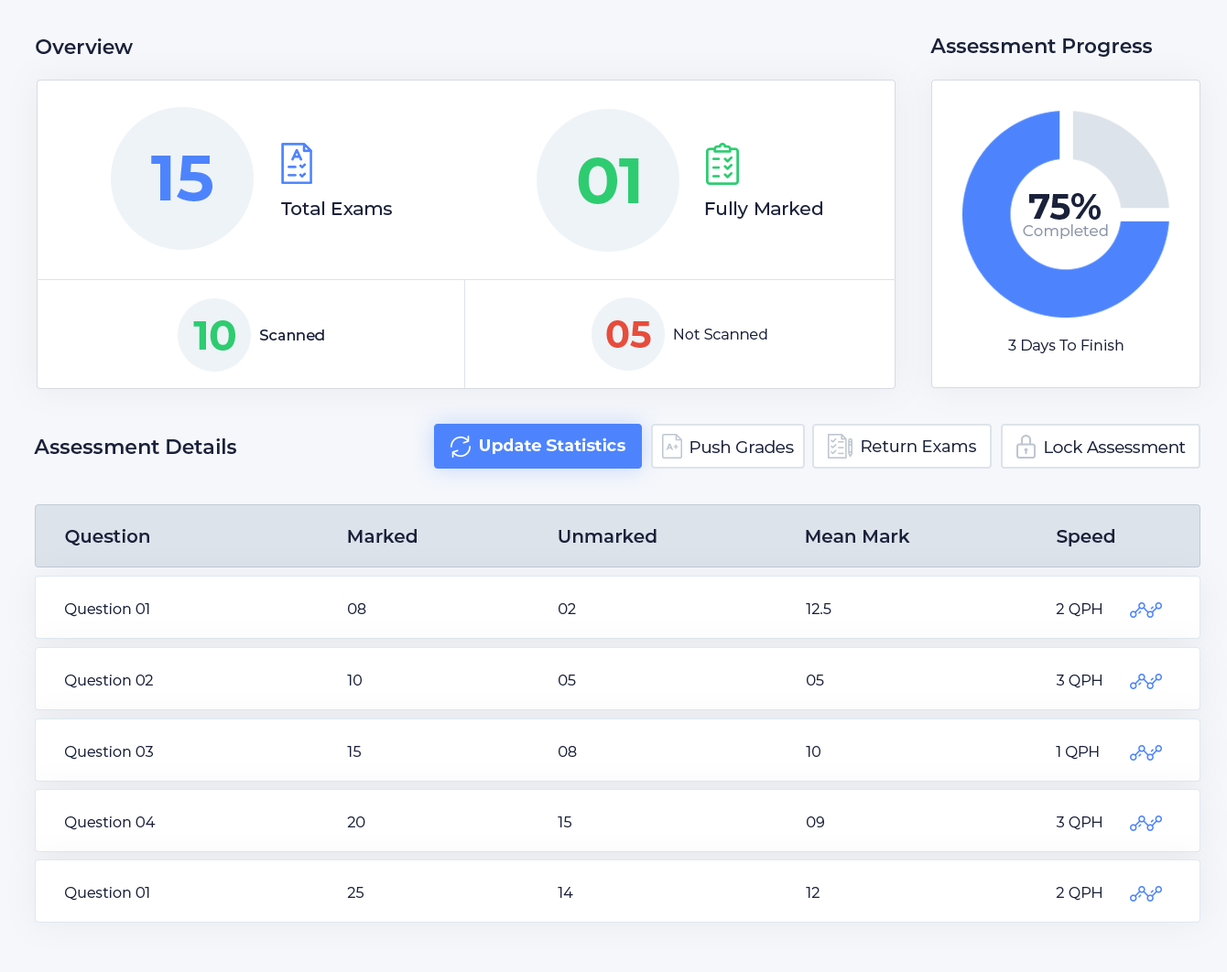
<style>
.page{position:relative;width:1227px;height:972px;background:#ffffff}
.page>*{position:absolute;margin:0}
.t1{font:20.1px "Montserrat-SemiBold";color:#1a213a}
.t2{font:64.1px "Montserrat-Bold";color:#4d84fe}
.t3{font:64.1px "Montserrat-Bold";color:#2ecc71}
.t4{font:35.8px "Montserrat-Bold";color:#1a213a}
.t5{font:18.3px "Montserrat-Medium";color:#1a213a}
.t6{font:15.4px "Montserrat-Regular";color:#8b93a7}
.t7{font:41.2px "Montserrat-Bold";color:#2ecc71}
.t8{font:14.6px "Montserrat-Medium";color:#1a213a}
.t9{font:36.6px "Montserrat-Bold";color:#e74c3c}
.t10{font:14.6px "Montserrat-Regular";color:#1a213a}
.t11{font:16.5px "Montserrat-Bold";color:#ffffff}
.t12{font:16.5px "Montserrat-Regular";color:#1a213a}
.t13{font:18.3px "Montserrat-SemiBold";color:#1a213a}
</style>
<div class="page">
<p class="t1" style="left:36px;top:38px;width:97px;height:16px">Overview</p>
<p class="t1" style="left:930px;top:38px;width:222px;height:19px">Assessment Progress</p>
<p class="t2" style="left:151px;top:156px;width:61px;height:45px">15</p>
<p class="t3" style="left:578px;top:157px;width:61px;height:47px">01</p>
<p class="t4" style="left:1029px;top:193px;width:71px;height:27px">75%</p>
<p class="t5" style="left:281px;top:201px;width:111px;height:14px">Total Exams</p>
<p class="t5" style="left:705px;top:201px;width:117px;height:18px">Fully Marked</p>
<p class="t6" style="left:1022px;top:224px;width:86px;height:15px">Completed</p>
<p class="t7" style="left:193px;top:320px;width:42px;height:31px">10</p>
<p class="t8" style="left:260px;top:330px;width:64px;height:11px">Scanned</p>
<p class="t9" style="left:606px;top:320px;width:45px;height:28px">05</p>
<p class="t10" style="left:674px;top:329px;width:93px;height:11px">Not Scanned</p>
<p class="t10" style="left:1008px;top:340px;width:115px;height:13px">3 Days To Finish</p>
<p class="t11" style="left:480px;top:438px;width:145px;height:16px">Update Statistics</p>
<p class="t1" style="left:34px;top:438px;width:202px;height:16px">Assessment Details</p>
<p class="t12" style="left:690px;top:440px;width:104px;height:13px">Push Grades</p>
<p class="t12" style="left:861px;top:440px;width:115px;height:12px">Return Exams</p>
<p class="t12" style="left:1044px;top:440px;width:141px;height:13px">Lock Assessment</p>
<p class="t13" style="left:65px;top:529px;width:84px;height:17px">Question</p>
<p class="t13" style="left:348px;top:529px;width:68px;height:14px">Marked</p>
<p class="t13" style="left:558px;top:529px;width:98px;height:14px">Unmarked</p>
<p class="t13" style="left:806px;top:529px;width:104px;height:14px">Mean Mark</p>
<p class="t13" style="left:1056px;top:529px;width:58px;height:17px">Speed</p>
<p class="t10" style="left:65px;top:603px;width:84px;height:14px">Question 01</p>
<p class="t10" style="left:348px;top:603px;width:18px;height:11px">08</p>
<p class="t10" style="left:558px;top:603px;width:18px;height:11px">02</p>
<p class="t10" style="left:806px;top:603px;width:25px;height:11px">12.5</p>
<p class="t10" style="left:1055px;top:603px;width:46px;height:14px">2 QPH</p>
<p class="t10" style="left:65px;top:675px;width:88px;height:13px">Question 02</p>
<p class="t10" style="left:347px;top:675px;width:15px;height:11px">10</p>
<p class="t10" style="left:558px;top:675px;width:18px;height:11px">05</p>
<p class="t10" style="left:806px;top:675px;width:18px;height:11px">05</p>
<p class="t10" style="left:1055px;top:675px;width:46px;height:13px">3 QPH</p>
<p class="t10" style="left:65px;top:746px;width:88px;height:14px">Question 03</p>
<p class="t10" style="left:347px;top:746px;width:14px;height:11px">15</p>
<p class="t10" style="left:558px;top:746px;width:19px;height:11px">08</p>
<p class="t10" style="left:806px;top:746px;width:14px;height:11px">10</p>
<p class="t10" style="left:1055px;top:746px;width:43px;height:14px">1 QPH</p>
<p class="t10" style="left:65px;top:817px;width:91px;height:13px">Question 04</p>
<p class="t10" style="left:347px;top:817px;width:18px;height:11px">20</p>
<p class="t10" style="left:557px;top:817px;width:14px;height:11px">15</p>
<p class="t10" style="left:806px;top:817px;width:18px;height:11px">09</p>
<p class="t10" style="left:1055px;top:817px;width:46px;height:13px">3 QPH</p>
<p class="t10" style="left:65px;top:887px;width:84px;height:14px">Question 01</p>
<p class="t10" style="left:347px;top:887px;width:16px;height:11px">25</p>
<p class="t10" style="left:557px;top:887px;width:16px;height:11px">14</p>
<p class="t10" style="left:806px;top:887px;width:13px;height:11px">12</p>
<p class="t10" style="left:1055px;top:887px;width:46px;height:14px">2 QPH</p>
</div>
